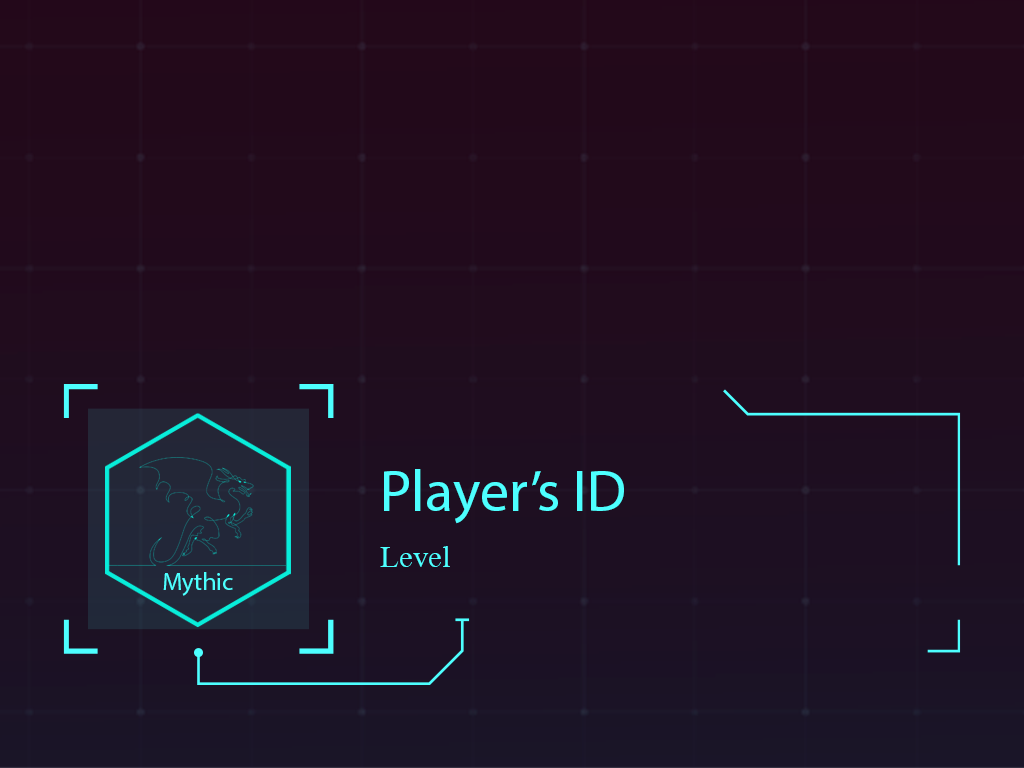
<style>
.page{position:relative;width:1024px;height:768px}
.page>*{position:absolute;margin:0}
.t1{font:58.3px "MyriadPro-Regular";color:#4dffff}
.t2{font:45.8px "Microsoft-Himalaya";color:#4dffff}
.t3{font:25px "MyriadPro-Regular";color:#4dffff}
</style>
<div class="page">
<p class="t1" style="left:384px;top:469px;width:240px;height:55px">Player’s ID</p>
<p class="t2" style="left:380px;top:546px;width:70px;height:21px">Level</p>
<p class="t3" style="left:163px;top:572px;width:70px;height:24px">Mythic</p>
</div>
